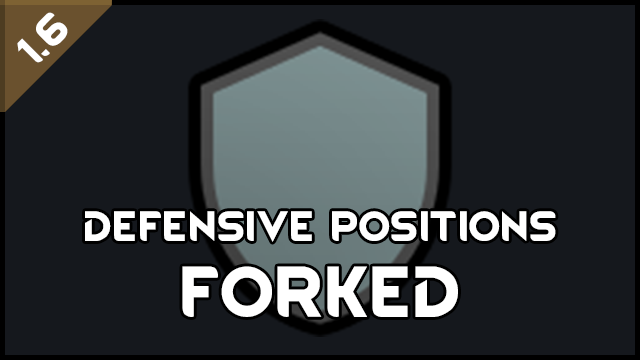
<style>
.page{position:relative;width:640px;height:360px;background:#15181d}
.page>*{position:absolute;margin:0}
.t1{font:36px "RimWordFont";letter-spacing:0.02em;color:#ffffff}
.t2{font:61px "RimWordFont";letter-spacing:0.02em;color:#ffffff}
</style>
<div class="page">
<p class="t1" style="left:17px;top:12px;width:51px;height:51px;rotate:-45deg">1.6</p>
<p class="t1" style="left:85px;top:211px;width:471px;height:106px;text-align:center">Defensive Positions<br><span class="t2">Forked</span></p>
</div>
